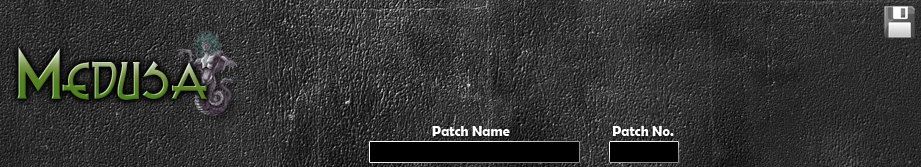
<style>
.page{position:relative;width:921px;height:167px}
.page>*{position:absolute;margin:0}
.t1{font:72px "RusselWriteTT"}
.t2{font:14px "BerlinSansFBDemi-Bold";color:#ffffff}
</style>
<div class="page">
<p class="t1" style="left:17px;top:47px;width:190px;height:53px">Medusa</p>
<p class="t2" style="left:432px;top:126px;width:78px;height:10px">Patch Name</p>
<p class="t2" style="left:612px;top:126px;width:62px;height:10px">Patch No.</p>
</div>
